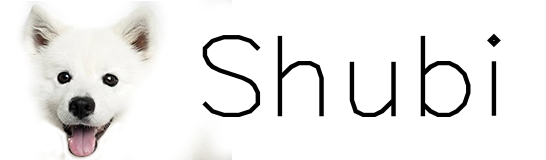
<style>
.page{position:relative;width:546px;height:160px;background:#ffffff}
.page>*{position:absolute;margin:0}
.t1{font:108.8px "Simplex_IV25";color:#020202}
</style>
<div class="page">
<p class="t1" style="left:202px;top:33px;width:299px;height:84px">Shubi</p>
</div>
